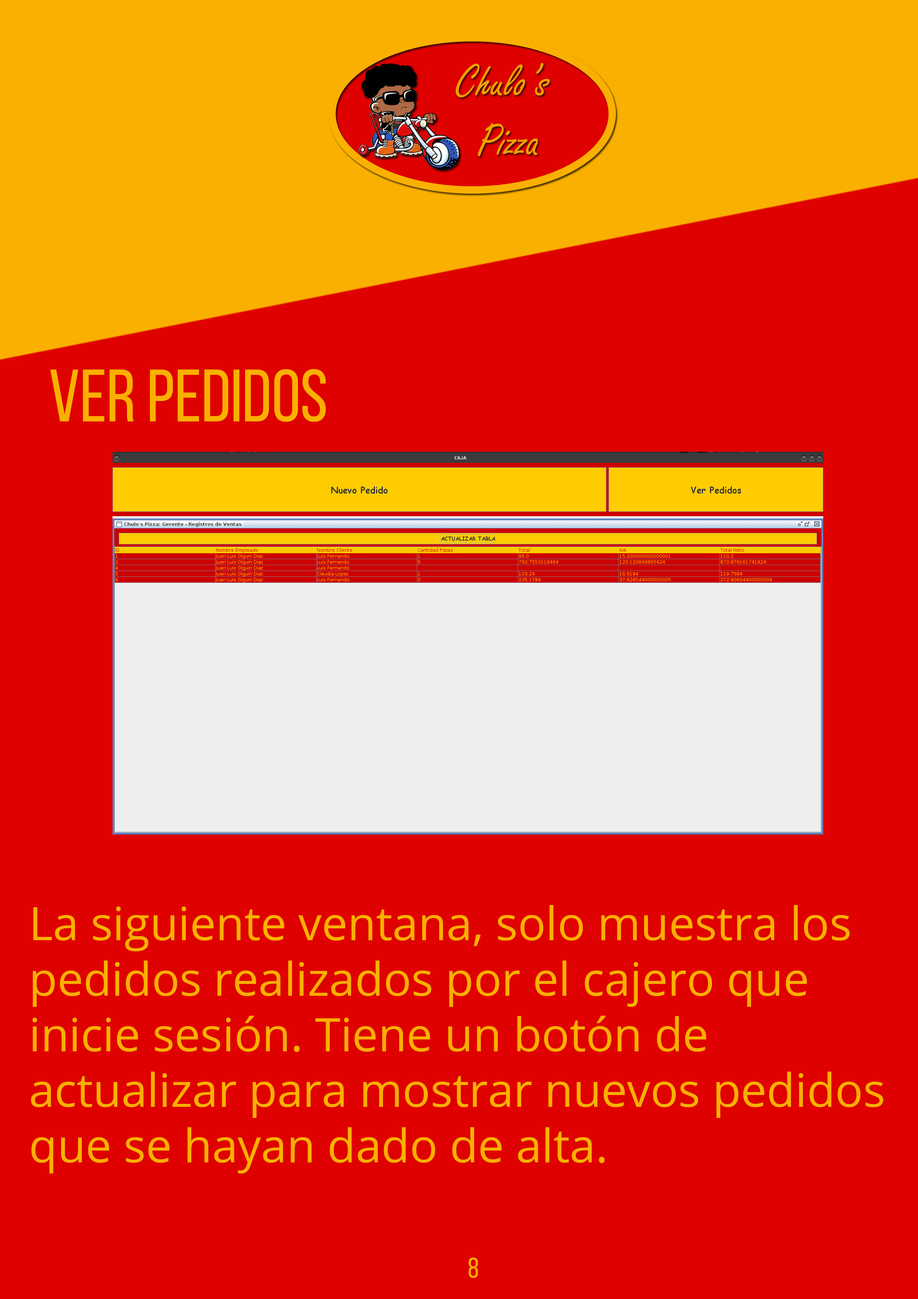
<style>
.page{position:relative;width:918px;height:1299px;background:#df0000}
.page>*{position:absolute;margin:0}
.t1{font:74px "BebasNeueRegular";color:#fab000}
.t2{font:46.3px "OpenSans";color:#fab000}
.t3{font:27.8px "BebasNeueRegular";color:#fab000}
</style>
<div class="page">
<p class="t1" style="left:50px;top:369px;width:276px;height:53px">Ver pedidos</p>
<p class="t2" style="left:31px;top:905px;width:852px;height:268px">La siguiente ventana, solo muestra los pedidos realizados por el cajero que inicie sesión. Tiene un botón de actualizar para mostrar nuevos pedidos que se hayan dado de alta.</p>
<p class="t3" style="left:469px;top:1257px;width:9px;height:21px">8</p>
</div>
